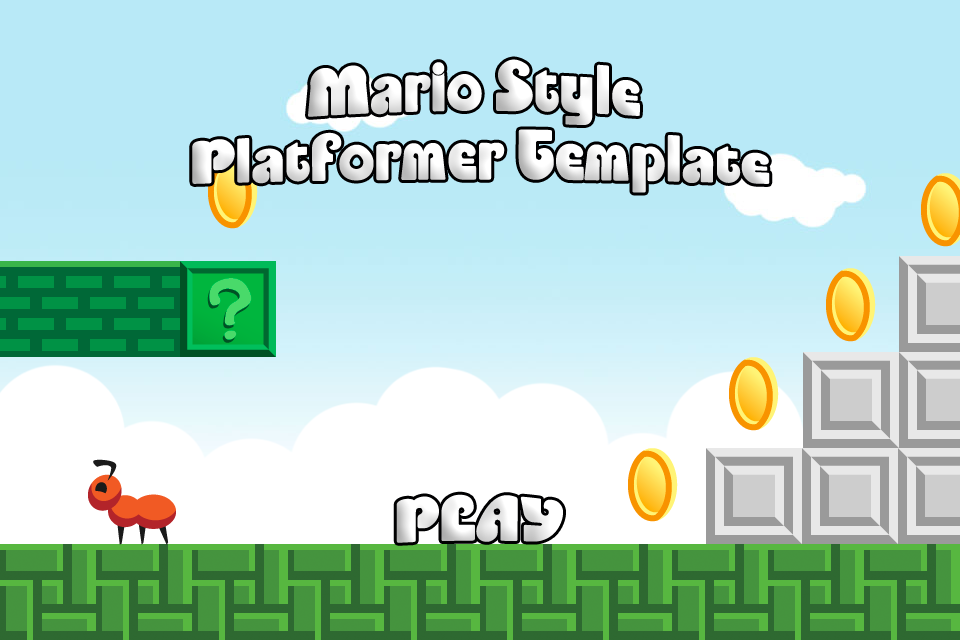
<style>
.page{position:relative;width:960px;height:640px;background:#b8e9f7}
.page>*{position:absolute;margin:0}
.t1{font:50.4px/56px "Enliven";color:#ffffff;scale:1.11 1}
.t2{font:50.4px "Enliven";color:#ffffff;scale:1.11 1}
</style>
<div class="page">
<p class="t1" style="left:192px;top:59px;width:578px;height:134px;text-align:center">Mario Style <br>Platformer Template</p>
<p class="t2" style="left:396px;top:494px;width:167px;height:49px">PLAY</p>
</div>
